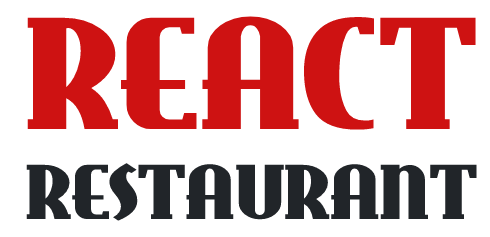
<style>
.page{position:relative;width:490px;height:237px;background:#ffffff}
.page>*{position:absolute;margin:0}
.t1{font:75px "EastMarket";color:#212529;text-transform:uppercase}
.t2{font:154px "EastMarket";color:#ce1212;text-transform:uppercase}
</style>
<div class="page">
<p class="t1" style="left:26px;top:16px;width:451px;height:205px"><span class="t2">React<br></span>Restaurant</p>
</div>
